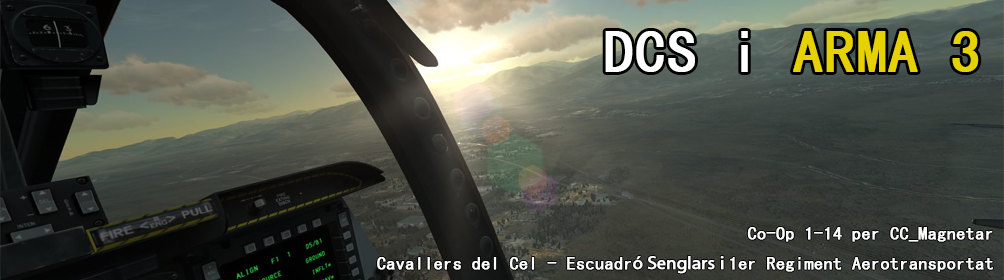
<style>
.page{position:relative;width:1004px;height:280px}
.page>*{position:absolute;margin:0}
.t1{font:60px "MS-Gothic";color:#e5d200;font-weight:bold}
.t2{font:60px "MS-Gothic";color:#ffffff;font-weight:bold}
.t3{font:18px/30px "MS-Gothic";color:#ffffff;font-weight:bold}
.t4{font:18px/30px "MyriadPro-Regular";color:#ffffff;font-weight:bold}
</style>
<div class="page">
<p class="t1" style="left:605px;top:31px;width:374px;height:41px"><span class="t2">DCS i </span>ARMA 3</p>
<p class="t3" style="left:377px;top:227px;width:616px;height:47px;text-align:right">Co-Op 1-14 per CC_Magnetar<br>Cavallers del Cel - Escuadr<span class="t4">ó Senglars i </span>1er Regiment Aerotransportat</p>
</div>
